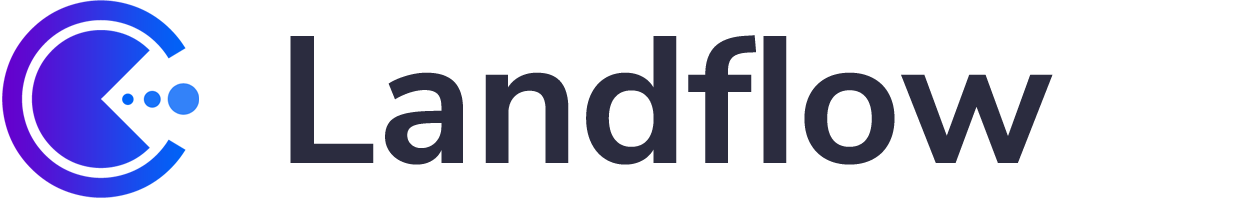
<style>
.page{position:relative;width:1250px;height:200px;background:#ffffff}
.page>*{position:absolute;margin:0}
.t1{font:180px "NunitoSans-Bold";color:#2b2c3f}
</style>
<div class="page">
<p class="t1" style="left:290px;top:35px;width:763px;height:130px">Landflow</p>
</div>
